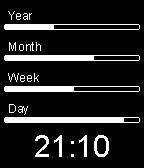
<style>
.page{position:relative;width:144px;height:168px;background:#000000}
.page>*{position:absolute;margin:0}
.t1{font:12px "ArialMT";color:#ffffff}
.t2{font:30px "ArialMT";color:#ffffff}
</style>
<div class="page">
<p class="t1" style="left:8px;top:11px;width:24px;height:9px">Year</p>
<p class="t1" style="left:9px;top:42px;width:32px;height:9px">Month</p>
<p class="t1" style="left:8px;top:73px;width:31px;height:9px">Week</p>
<p class="t1" style="left:9px;top:104px;width:19px;height:11px">Day</p>
<p class="t2" style="left:35px;top:135px;width:74px;height:22px">21:10</p>
</div>
